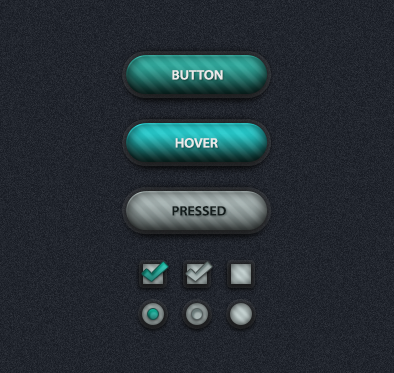
<style>
.page{position:relative;width:394px;height:373px}
.page>*{position:absolute;margin:0}
.t1{font:13.4px "MyriadPro-Semibold";color:#eaeaea;scale:1.05 1}
.t2{font:13.4px "MyriadPro-Semibold";color:#141d1c;scale:1.05 1}
</style>
<div class="page">
<p class="t1" style="left:172px;top:70px;width:51px;height:10px">BUTTON</p>
<p class="t1" style="left:175px;top:138px;width:43px;height:10px">HOVER</p>
<p class="t2" style="left:172px;top:206px;width:54px;height:10px">PRESSED</p>
</div>
